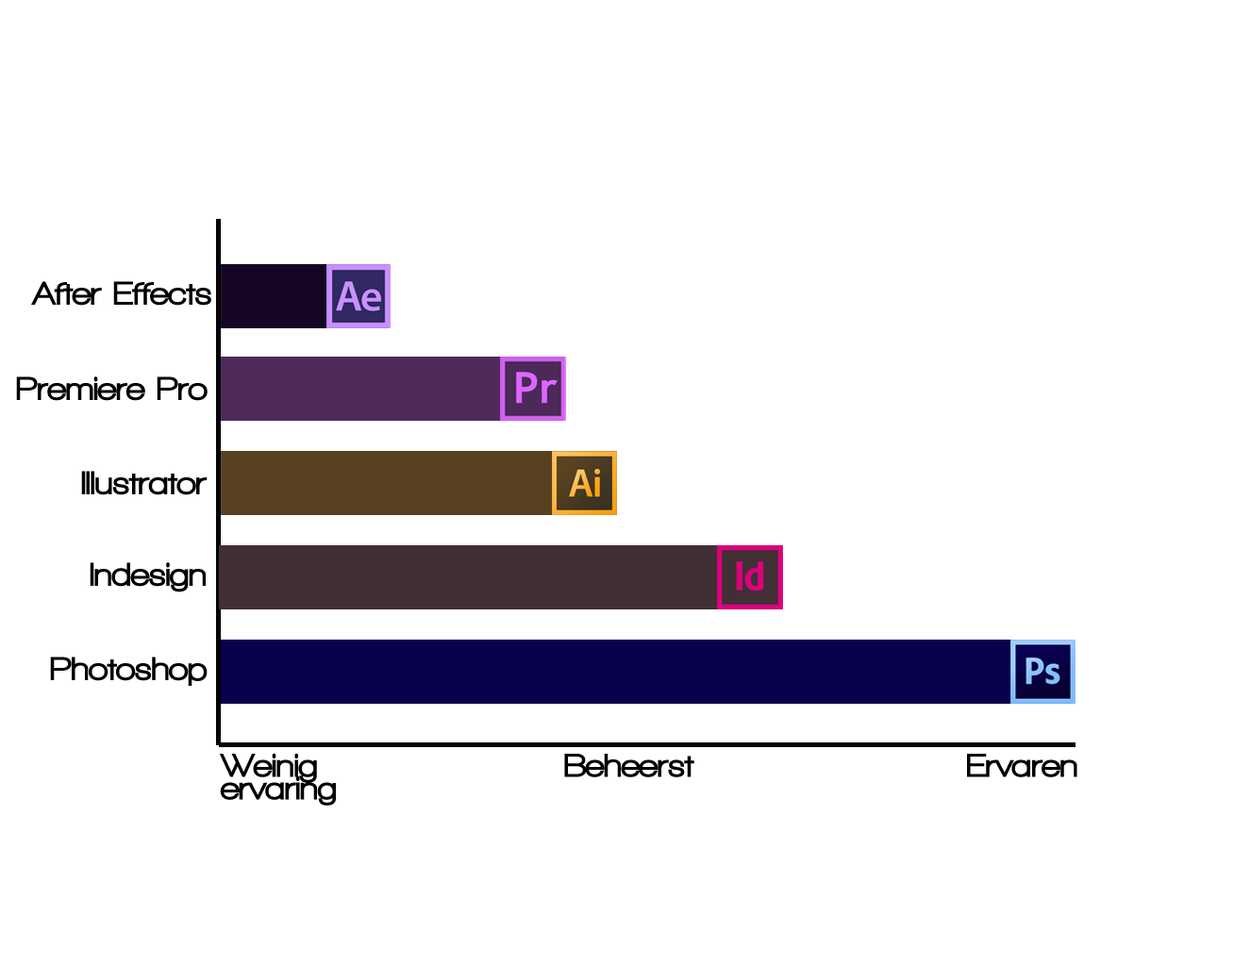
<style>
.page{position:relative;width:1234px;height:966px;background:#ffffff}
.page>*{position:absolute;margin:0}
.t1{font:34px "WalkwayBlack";color:#000000}
.t2{font:34px/22.6px "WalkwayBlack";color:#000000}
</style>
<div class="page">
<p class="t1" style="left:31px;top:281px;width:180px;height:25px">After Effects</p>
<p class="t1" style="left:16px;top:376px;width:192px;height:25px">Premiere Pro</p>
<p class="t1" style="left:81px;top:471px;width:127px;height:24px">Illustrator</p>
<p class="t1" style="left:90px;top:562px;width:116px;height:31px">Indesign</p>
<p class="t1" style="left:50px;top:657px;width:158px;height:29px">Photoshop</p>
<p class="t2" style="left:219px;top:753px;width:117px;height:53px">Weinig <br>ervaring</p>
<p class="t1" style="left:564px;top:754px;width:130px;height:23px">Beheerst</p>
<p class="t1" style="left:967px;top:754px;width:111px;height:23px">Ervaren</p>
</div>
